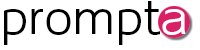
<style>
.page{position:relative;width:200px;height:50px;background:#ffffff}
.page>*{position:absolute;margin:0}
.t1{font:72px "PSLOrnanongPro-Regular";color:#000000}
.t2{font:72px "PSLOrnanongPro-Regular";color:#ffffff}
</style>
<div class="page">
<p class="t1" style="left:4px;top:1px;width:182px;height:44px">prompt<span class="t2">a</span></p>
</div>
